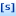
<style>
.page{position:relative;width:16px;height:16px}
.page>*{position:absolute;margin:0}
.t1{font:8.3px "Fixedsys";color:#003399}
</style>
<div class="page">
<p class="t1" style="left:1px;top:3px;width:14px;height:10px">[s]</p>
</div>
